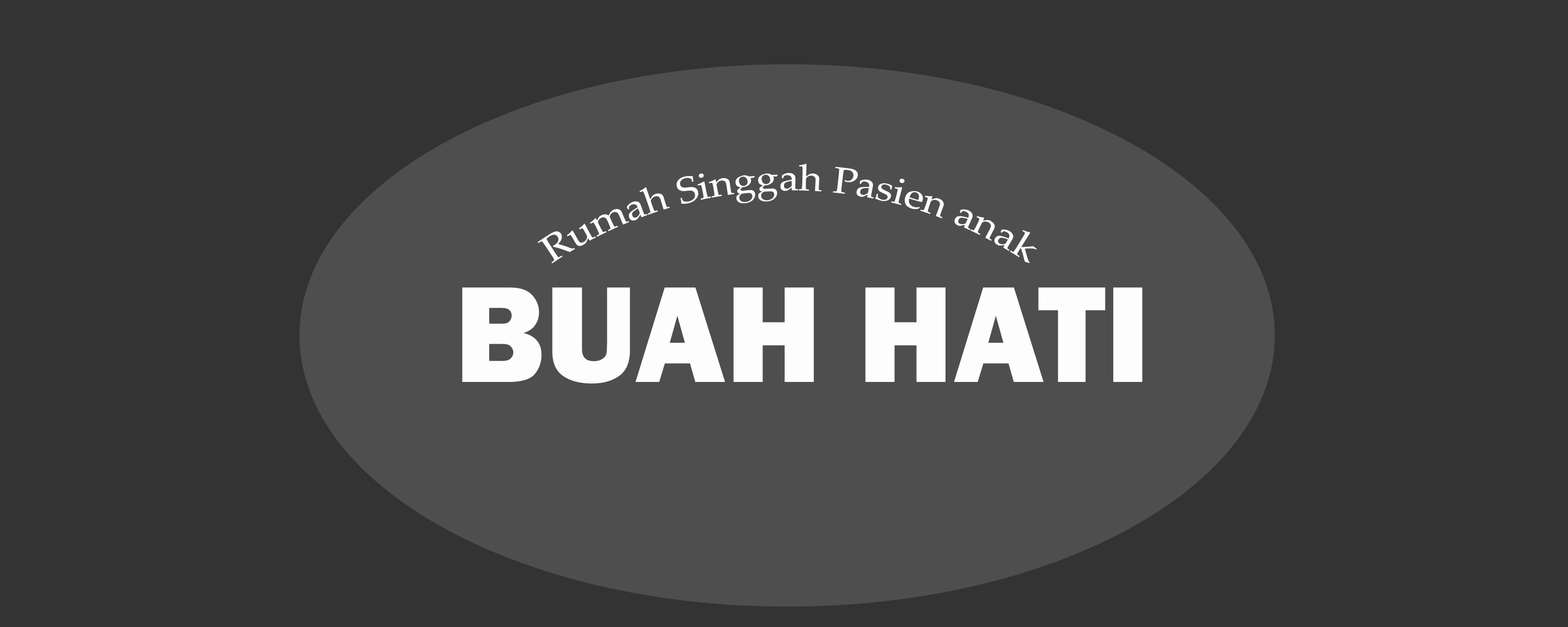
<style>
.page{position:relative;width:1568px;height:627px;background:#333333}
.page>*{position:absolute;margin:0}
.t1{font:37px "PalatinoLinotype-Roman";color:#fdfdfd}
.t2{font:141.6px "FranklinGothic-Heavy";color:#fdfdfd}
</style>
<div class="page">
<p class="t1" style="left:537px;top:164px;width:500px;height:99px">Rumah Singgah Pasien anak</p>
<p class="t2" style="left:462px;top:287px;width:681px;height:97px">BUAH HATI</p>
</div>
